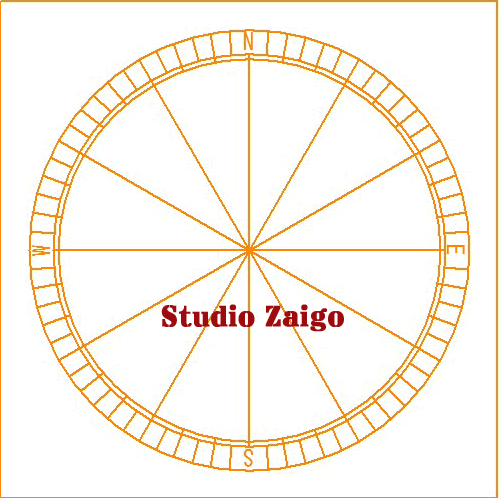
<style>
.page{position:relative;width:499px;height:498px;background:#ffffff}
.page>*{position:absolute;margin:0}
.t1{font:29.9px "SanDiego";color:#9e0b0f;font-weight:bold}
</style>
<div class="page">
<p class="t1" style="left:161px;top:304px;width:183px;height:28px">Studio Zaigo</p>
</div>
